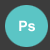
<style>
.page{position:relative;width:50px;height:50px;background:#5bc5c5}
.page>*{position:absolute;margin:0}
.t1{font:20px "Utsaah-Bold";color:#ffffff}
</style>
<div class="page">
<p class="t1" style="left:19px;top:20px;width:16px;height:12px">Ps</p>
</div>
